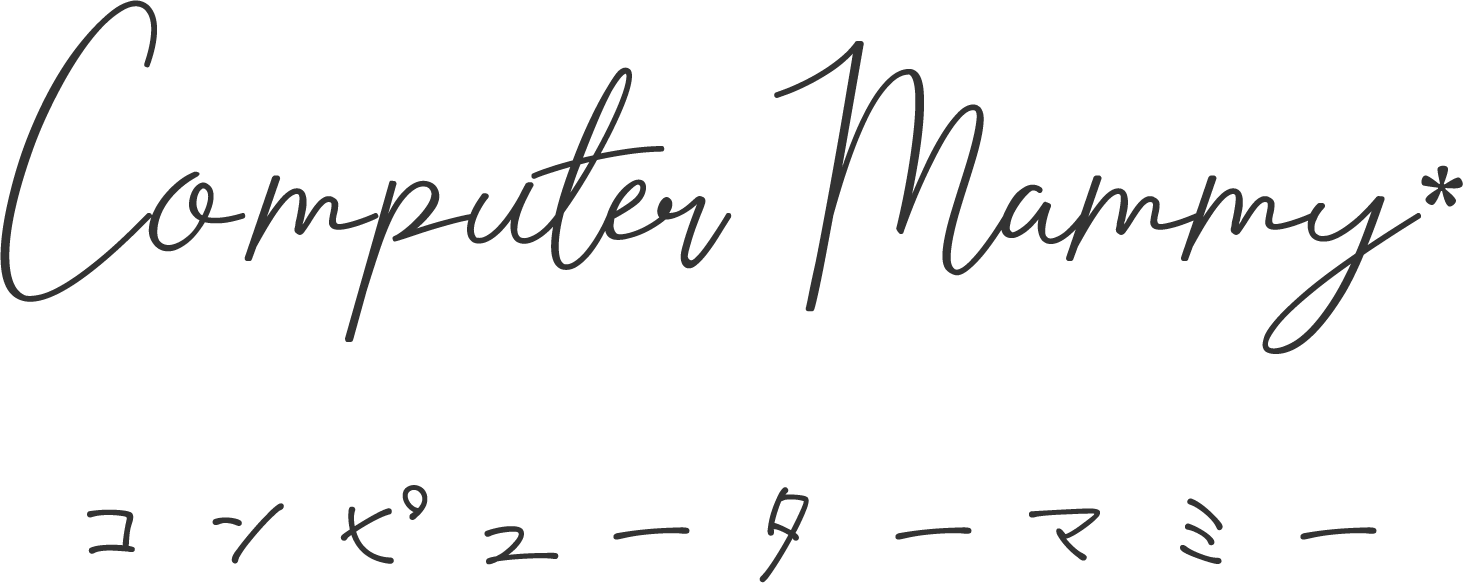
<style>
.page{position:relative;width:1463px;height:583px;background:#ffffff}
.page>*{position:absolute;margin:0}
.t1{font:300px "EisleyClaise";color:#333333}
.t2{font:100px "Candara";color:#333333}
.t3{font:150px "karakaze-M";color:#333333}
</style>
<div class="page">
<p class="t1" style="left:0px;top:0px;width:1463px;height:354px">ComputerMammy<span class="t2">*</span></p>
<p class="t3" style="left:87px;top:485px;width:1290px;height:98px">コンピューターマミー</p>
</div>
